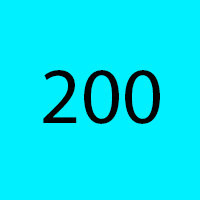
<style>
.page{position:relative;width:200px;height:200px;background:#00f0ff}
.page>*{position:absolute;margin:0}
.t1{font:80px "MyriadPro-Regular";color:#000000}
</style>
<div class="page">
<p class="t1" style="left:43px;top:70px;width:117px;height:54px">200</p>
</div>
